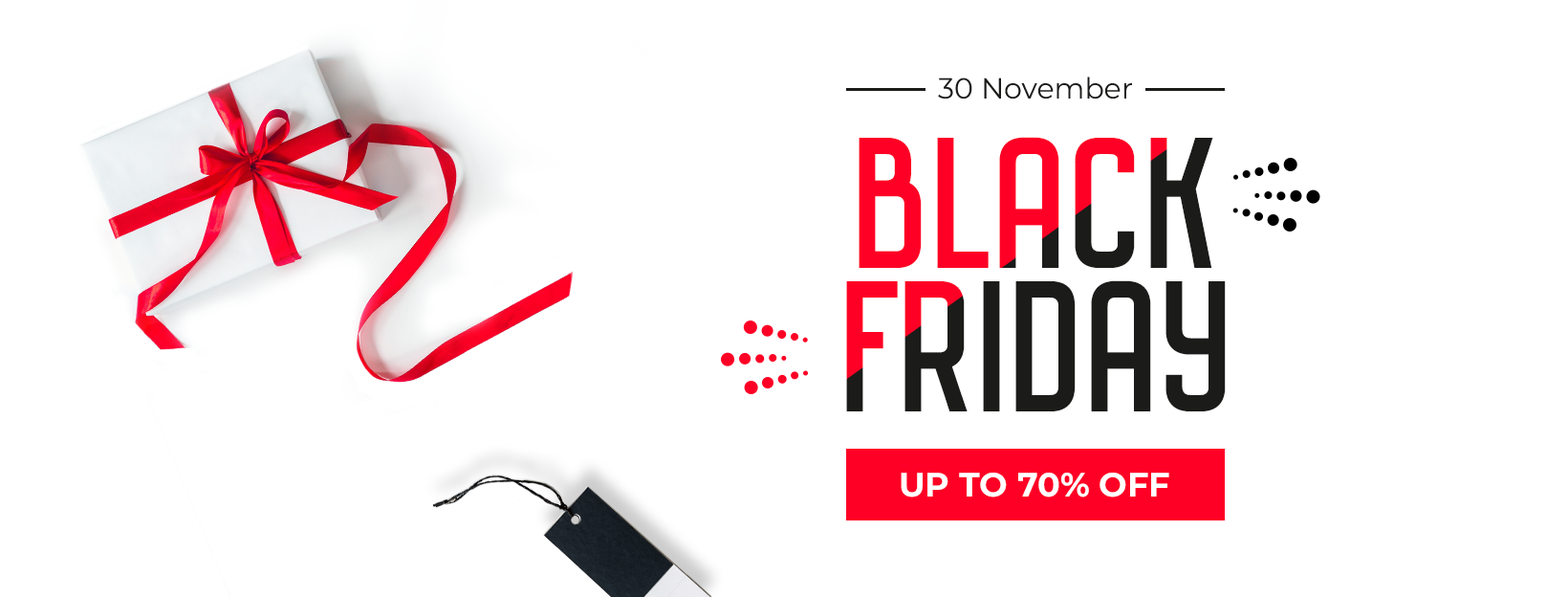
<style>
.page{position:relative;width:1568px;height:597px;background:#ffffff}
.page>*{position:absolute;margin:0}
.t1{font:28.7px "Montserrat-Regular";color:#1b1b1a}
.t2{font:162.5px/143.4px "Octanis-Sans"}
.t3{font:33.5px "Montserrat-Bold";color:#ffffff}
</style>
<div class="page">
<p class="t1" style="left:938px;top:76px;width:194px;height:23px">30 November</p>
<p class="t2" style="left:846px;top:137px;width:380px;height:274px;text-align:center">BLACK<br>FRIDAY</p>
<p class="t3" style="left:901px;top:472px;width:268px;height:25px">UP TO 70% OFF</p>
</div>
